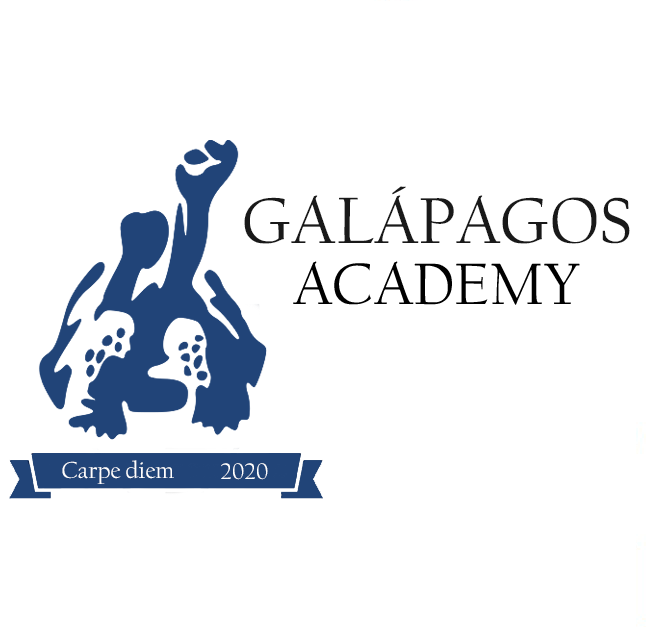
<style>
.page{position:relative;width:647px;height:627px;background:#ffffff}
.page>*{position:absolute;margin:0}
.t1{font:68.1px "CalifornianFB-Reg";color:#191919}
.t2{font:24px "CalifornianFB-Reg";color:#ffffff}
</style>
<div class="page">
<p class="t1" style="left:244px;top:186px;width:386px;height:58px">GALÁPAGOS</p>
<p class="t2" style="left:62px;top:460px;width:112px;height:24px">Carpe diem</p>
<p class="t2" style="left:221px;top:463px;width:47px;height:17px">2020</p>
</div>
